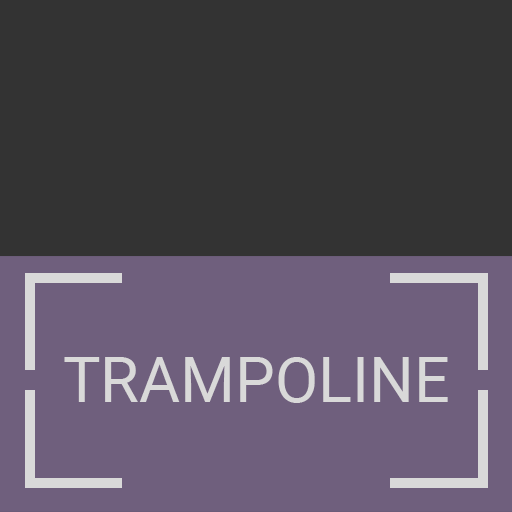
<style>
.page{position:relative;width:512px;height:512px;background:#333333}
.page>*{position:absolute;margin:0}
.t1{font:63px "Roboto-Regular";color:#d9d9d9}
</style>
<div class="page">
<p class="t1" style="left:64px;top:357px;width:384px;height:46px">TRAMPOLINE</p>
</div>
